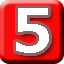
<style>
.page{position:relative;width:64px;height:64px;background:#ffffff}
.page>*{position:absolute;margin:0}
.t1{font:60px "Meiryo-Bold";color:#ffffff}
</style>
<div class="page">
<p class="t1" style="left:16px;top:8px;width:33px;height:45px">5</p>
</div>
